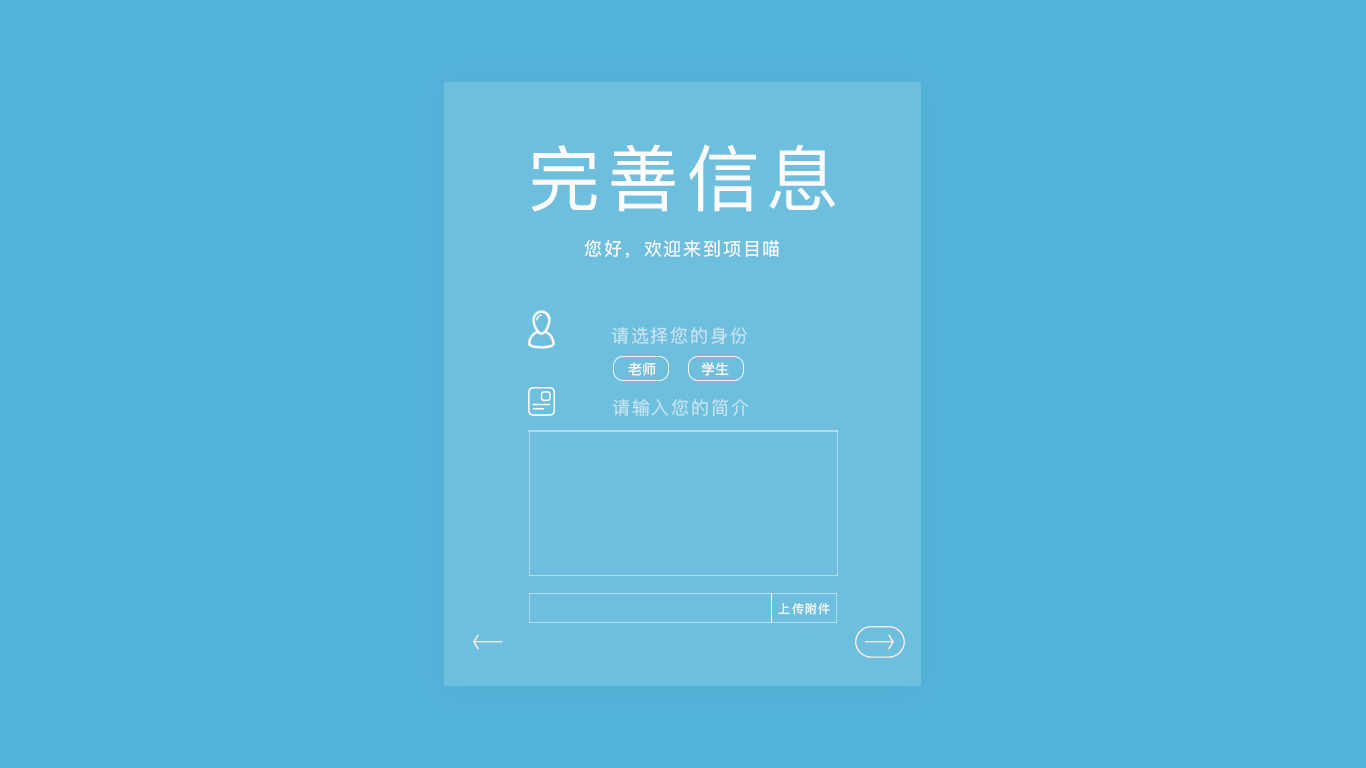
<style>
.page{position:relative;width:1366px;height:768px;background:#54b3d9}
.page>*{position:absolute;margin:0}
.t1{font:72px "PingFangSC-Regular";letter-spacing:0.1em;color:#fcfcfc}
.t2{font:18px "PingFangSC-Regular";letter-spacing:0.1em;color:#fcfcfc}
.t3{font:18px "PingFangSC-Regular";letter-spacing:0.1em;color:#c6e3f0}
.t4{font:14px "PingFangSC-Regular";color:#f8f8f4}
.t5{font:12px "PingFangSC-Regular";letter-spacing:0.1em;color:#f7f9f9}
</style>
<div class="page">
<p class="t1" style="left:531px;top:144px;width:304px;height:68px">完善信息</p>
<p class="t2" style="left:584px;top:240px;width:196px;height:18px">您好，欢迎来到项目喵</p>
<p class="t3" style="left:611px;top:327px;width:137px;height:17px">请选择您的身份</p>
<p class="t4" style="left:628px;top:362px;width:28px;height:14px">老师</p>
<p class="t4" style="left:701px;top:362px;width:28px;height:14px">学生</p>
<p class="t3" style="left:612px;top:399px;width:137px;height:17px">请输入您的简介</p>
<p class="t5" style="left:778px;top:603px;width:52px;height:12px">上传附件</p>
</div>
